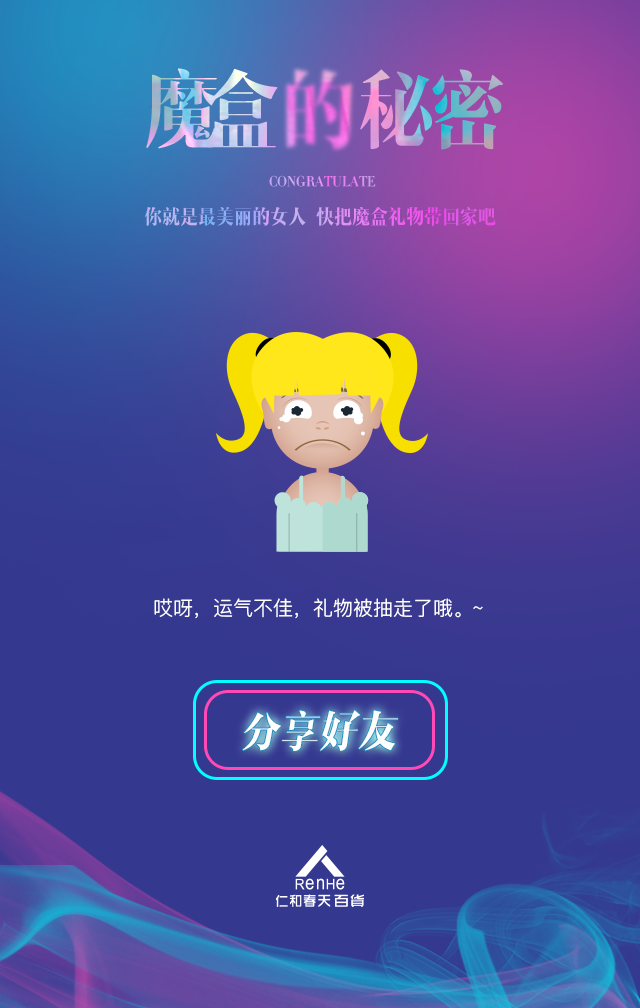
<style>
.page{position:relative;width:640px;height:1008px}
.page>*{position:absolute;margin:0}
.t1{font:85.9px "MFShangYa_Noncommercial-Regular";scale:0.9 1}
.t2{font:85.9px "MFShangYa_Noncommercial-Regular";color:#cfd4ef;scale:0.9 1}
.t3{font:14px "MFShangYa_Noncommercial-Regular";text-transform:uppercase;scale:0.9 1}
.t4{font:20px "MFShangYa_Noncommercial-Regular";text-transform:uppercase;scale:0.9 1}
.t5{font:20px "PingFangSC-Light";color:#ffffff}
.t6{font:43.7px "MFShangYa_Noncommercial-Regular";color:#ffffff;scale:0.89 1}
</style>
<div class="page">
<p class="t1" style="left:146px;top:68px;width:72px;height:81px">魔</p>
<p class="t2" style="left:207px;top:68px;width:71px;height:80px">盒</p>
<p class="t1" style="left:360px;top:69px;width:72px;height:80px">秘</p>
<p class="t1" style="left:432px;top:69px;width:71px;height:81px">密</p>
<p class="t3" style="left:269px;top:175px;width:107px;height:12px">congratulate</p>
<p class="t4" style="left:145px;top:207px;width:351px;height:19px">你就是最美丽的女人  快把魔盒礼物带回家吧</p>
<p class="t5" style="left:154px;top:598px;width:329px;height:21px">哎呀，运气不佳，礼物被抽走了哦。~</p>
<p class="t6" style="left:242px;top:710px;width:156px;height:41px">分享好友</p>
</div>
